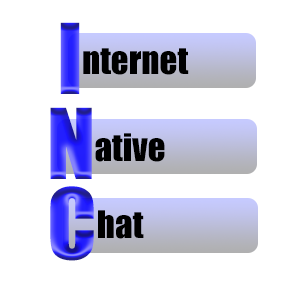
<style>
.page{position:relative;width:290px;height:290px;background:#ffffff}
.page>*{position:absolute;margin:0}
.t1{font:90px "Impact"}
.t2{font:35px "Impact";color:#000000}
</style>
<div class="page">
<p class="t1" style="left:60px;top:22px;width:20px;height:72px">I</p>
<p class="t2" style="left:83px;top:48px;width:106px;height:27px">nternet</p>
<p class="t1" style="left:50px;top:107px;width:42px;height:72px">N</p>
<p class="t2" style="left:95px;top:133px;width:70px;height:29px">ative</p>
<p class="t1" style="left:50px;top:186px;width:44px;height:75px">C</p>
<p class="t2" style="left:98px;top:210px;width:46px;height:29px">hat</p>
</div>
